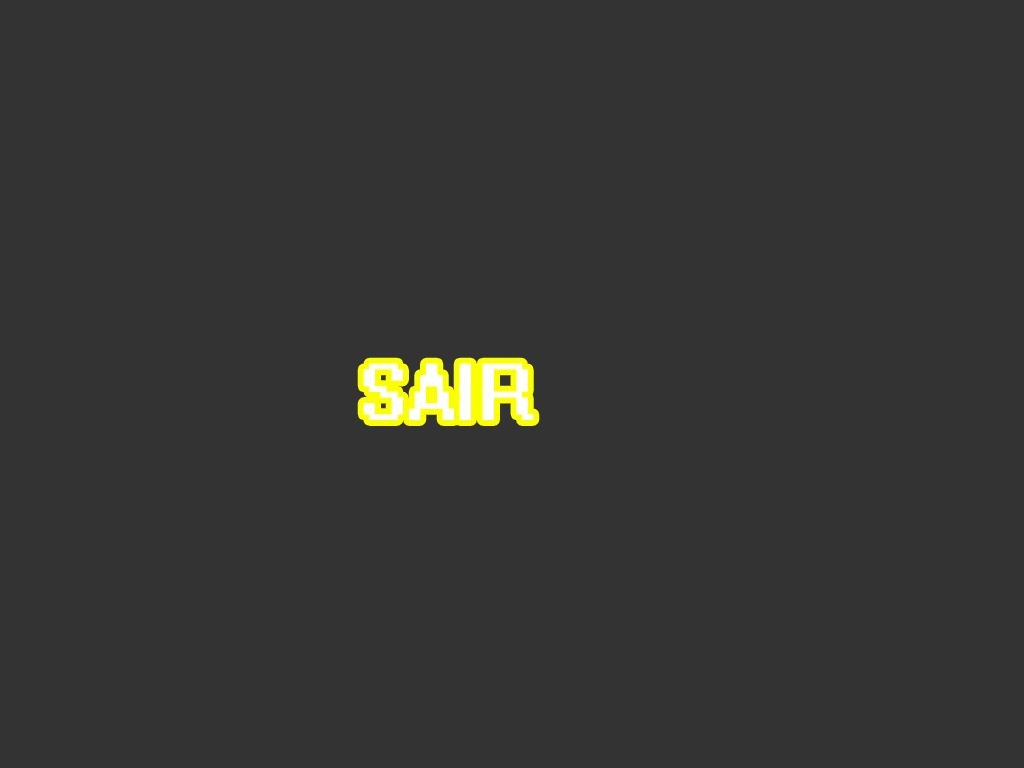
<style>
.page{position:relative;width:1024px;height:768px;background:#333333}
.page>*{position:absolute;margin:0}
.t1{font:72px "System";color:#ffffff}
</style>
<div class="page">
<p class="t1" style="left:363px;top:363px;width:171px;height:57px">SAIR</p>
</div>
